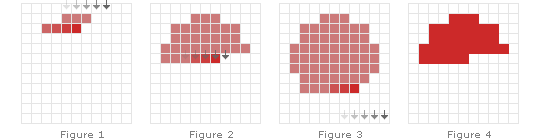
<style>
.page{position:relative;width:540px;height:140px;background:#ffffff}
.page>*{position:absolute;margin:0}
.t1{font:10px "Verdana";color:#7f7f7f}
</style>
<div class="page">
<p class="t1" style="left:61px;top:131px;width:43px;height:9px">Figure 1</p>
<p class="t1" style="left:190px;top:131px;width:43px;height:9px">Figure 2</p>
<p class="t1" style="left:319px;top:131px;width:43px;height:9px">Figure 3</p>
<p class="t1" style="left:448px;top:131px;width:43px;height:9px">Figure 4</p>
</div>
